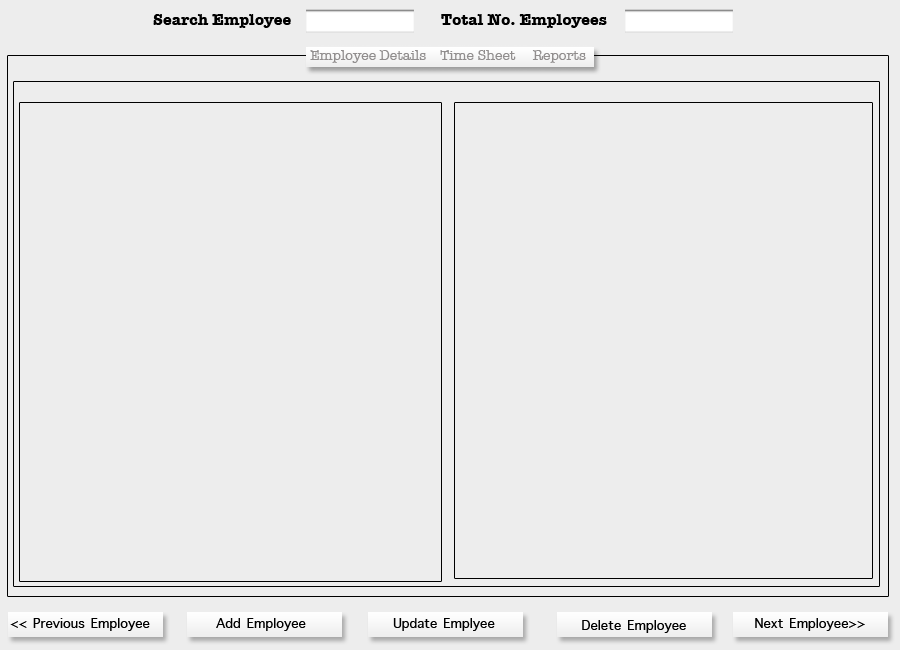
<style>
.page{position:relative;width:900px;height:650px;background:#ededed}
.page>*{position:absolute;margin:0}
.t1{font:16px "AmericanTypewriter-Bold";color:#000000}
.t2{font:14px "AmericanTypewriter";color:#918e8e}
.t3{font:18px "AppleSymbols";color:#000000}
</style>
<div class="page">
<p class="t1" style="left:153px;top:14px;width:454px;height:14px">Search Employee     Total No. Employees</p>
<p class="t2" style="left:310px;top:50px;width:276px;height:13px">Employee Details    Time Sheet     Reports</p>
<p class="t3" style="left:10px;top:618px;width:140px;height:13px">&lt;&lt; Previous Employee</p>
<p class="t3" style="left:216px;top:618px;width:90px;height:13px">Add Employee</p>
<p class="t3" style="left:393px;top:618px;width:102px;height:13px">Update Emplyee</p>
<p class="t3" style="left:582px;top:620px;width:104px;height:13px">Delete Employee</p>
<p class="t3" style="left:755px;top:618px;width:110px;height:13px">Next Employee&gt;&gt;</p>
</div>
